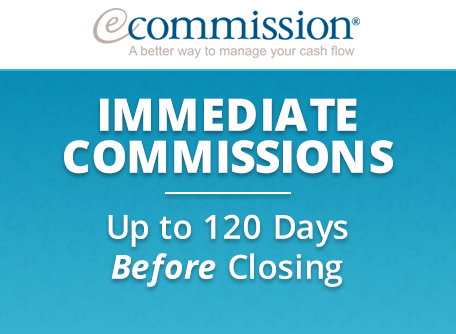
<style>
.page{position:relative;width:456px;height:334px;background:#ffffff}
.page>*{position:absolute;margin:0}
.t1{font:44.7px/42px "OpenSans-Extrabold";color:#ffffff;text-transform:uppercase}
.t2{font:33.4px "OpenSans-Semibold";color:#ffffff}
.t3{font:33.4px "OpenSans-BoldItalic";color:#ffffff}
</style>
<div class="page">
<p class="t1" style="left:64px;top:98px;width:329px;height:76px;text-align:center">Immediate<br>Commissions</p>
<p class="t2" style="left:108px;top:214px;width:240px;height:73px;text-align:center">Up to 120 Days<br><span class="t3">Before</span> Closing</p>
</div>
